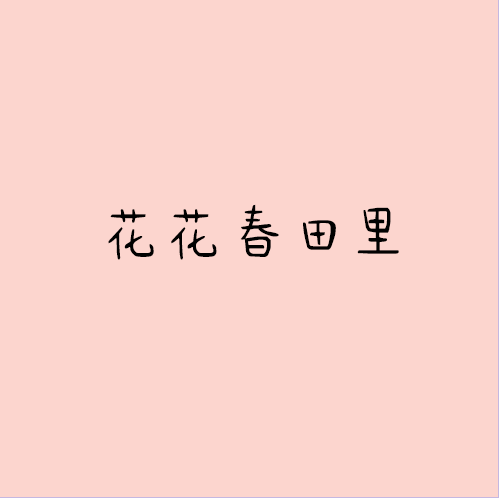
<style>
.page{position:relative;width:500px;height:500px;background:#fcd5ce}
.page>*{position:absolute;margin:0}
.t1{font:72px "IdeaFonts-QianXiaTi";color:#010101}
</style>
<div class="page">
<p class="t1" style="left:108px;top:204px;width:291px;height:56px">花花春田里</p>
</div>
